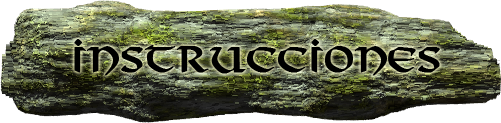
<style>
.page{position:relative;width:501px;height:123px}
.page>*{position:absolute;margin:0}
.t1{font:34px "Viking-Medium";color:#000000;font-weight:bold}
</style>
<div class="page">
<p class="t1" style="left:74px;top:39px;width:366px;height:37px">Instrucciones</p>
</div>
